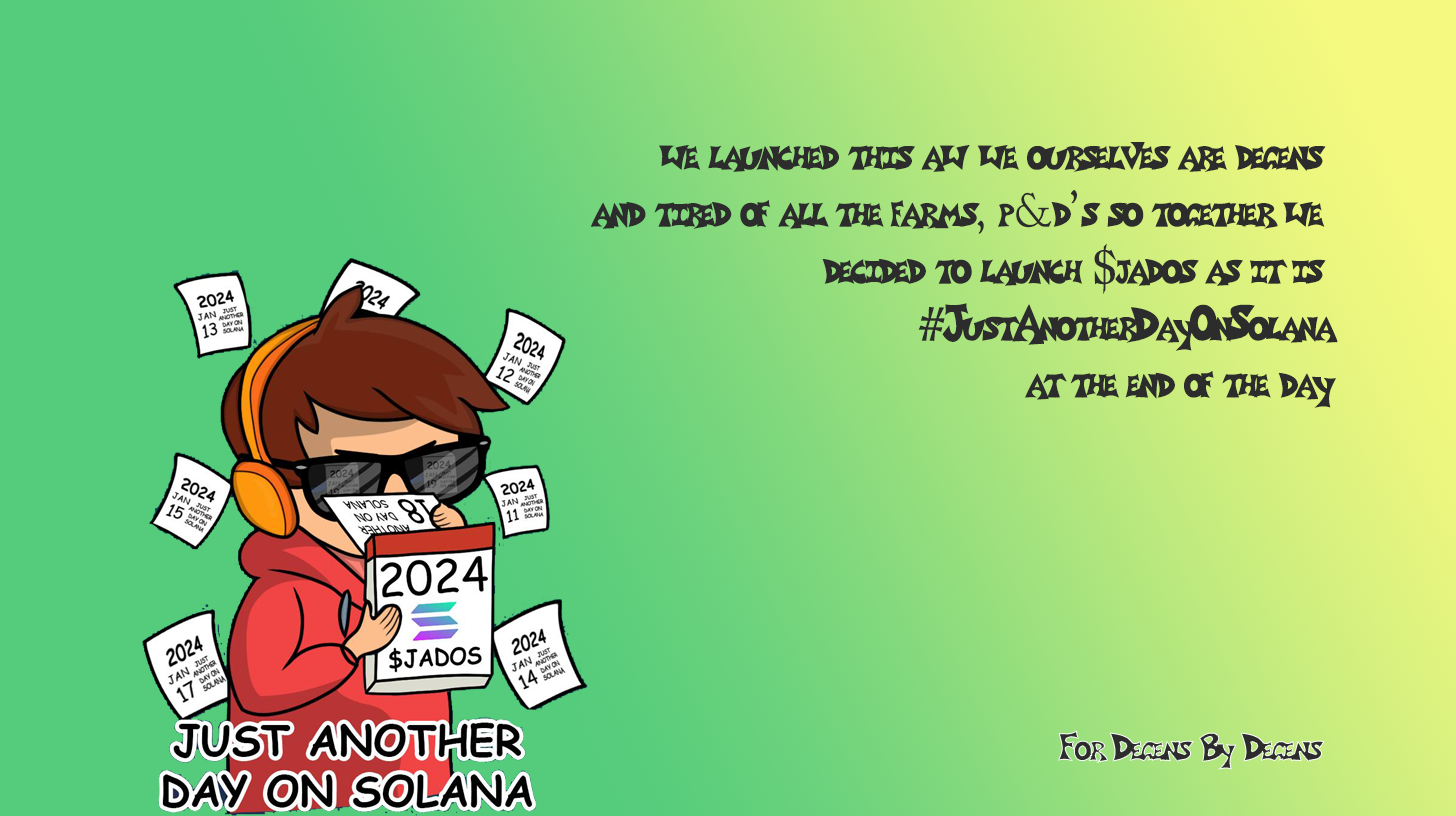
<style>
.page{position:relative;width:1456px;height:816px}
.page>*{position:absolute;margin:0}
.t1{font:47.5px "grafittiposter1";color:#2c2c2c}
.t2{font:40px "grafittiposter1"}
</style>
<div class="page">
<p class="t1" style="left:590px;top:142px;width:748px;height:266px;text-align:right">we launched this aw we ourselves are degens <br>and tired of all the farms, p&amp;d’s so together we <br>decided to launch $jados as it is <br>#JustAnotherDayOnSolana<br>at the end of the day</p>
<p class="t2" style="left:1058px;top:730px;width:267px;height:40px">For Degens By Degens</p>
</div>
